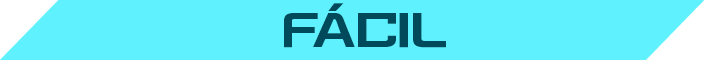
<style>
.page{position:relative;width:706px;height:60px;background:#5ff2fe}
.page>*{position:absolute;margin:0}
.t1{font:38.7px "KafuTechnoStd-U";color:#004a5b;scale:1.21 1}
</style>
<div class="page">
<p class="t1" style="left:284px;top:3px;width:162px;height:45px">FÁCIL</p>
</div>
